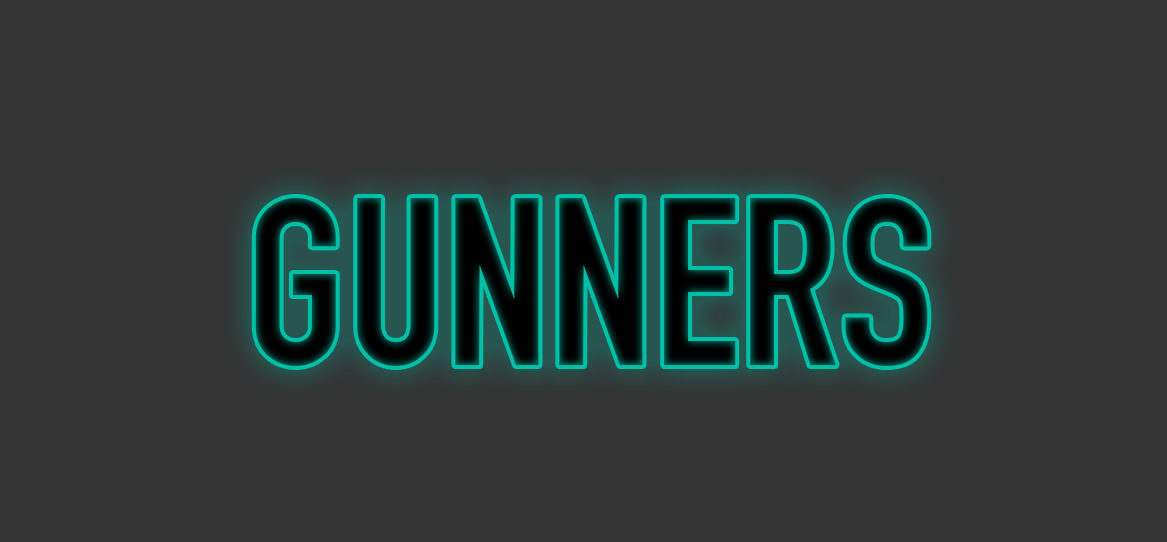
<style>
.page{position:relative;width:1167px;height:542px;background:#333333}
.page>*{position:absolute;margin:0}
.t1{font:233.7px "DINEngschrift";color:#000c0a;text-transform:uppercase}
</style>
<div class="page">
<p class="t1" style="left:255px;top:198px;width:673px;height:168px">gunners</p>
</div>
